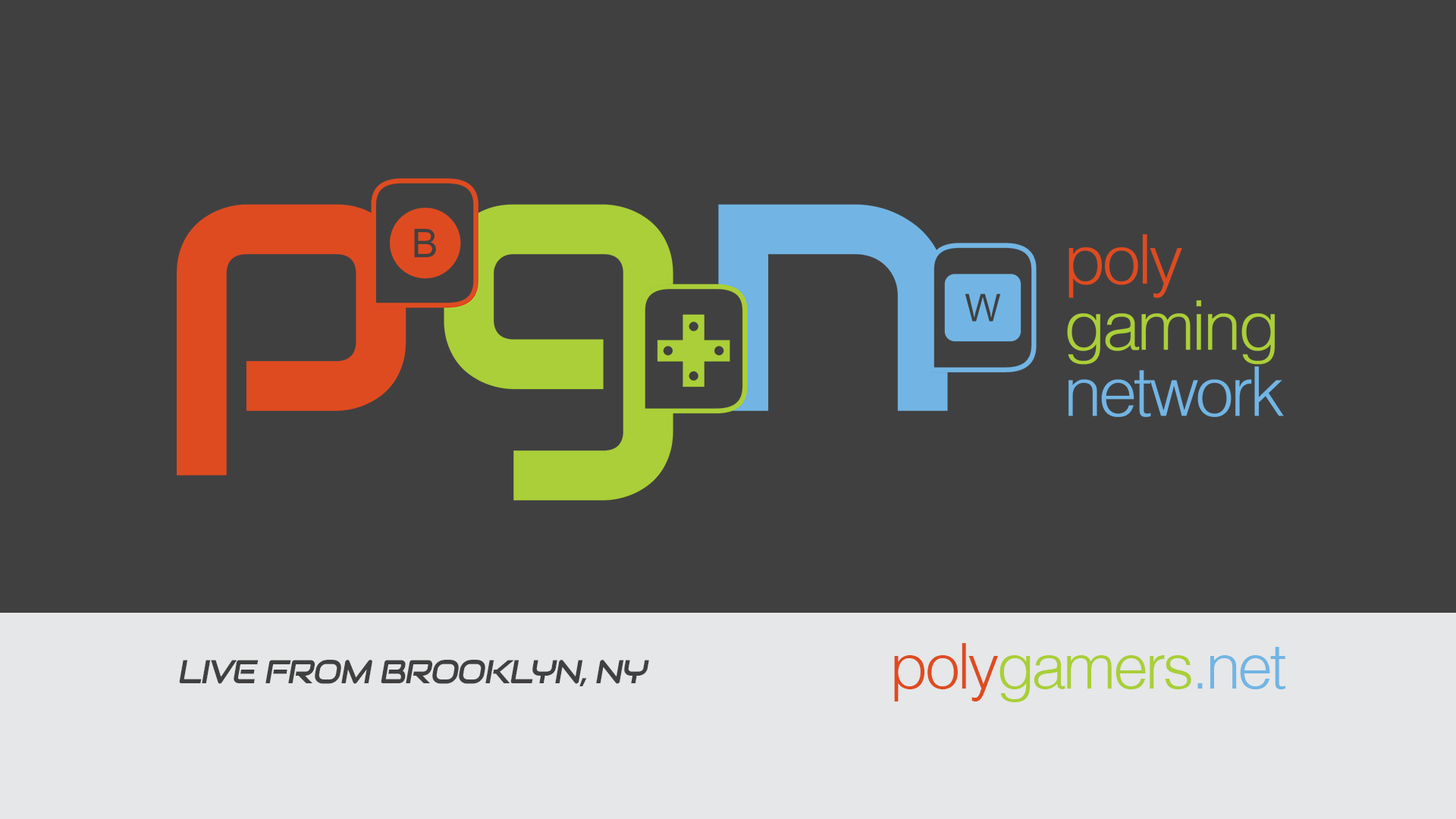
<style>
.page{position:relative;width:1456px;height:819px;background:#404041}
.page>*{position:absolute;margin:0}
.t1{font:63.1px "Helvetica-Light";letter-spacing:-0.05em;color:#a9cf37}
.t2{font:63.1px "Helvetica-Light";letter-spacing:-0.05em;color:#de4b20}
.t3{font:63.1px "Helvetica-Light";letter-spacing:-0.05em;color:#72b5e3}
.t4{font:33.1px "Audiowide-Regular";letter-spacing:-0.05em;color:#404041;text-transform:uppercase;font-style:italic}
</style>
<div class="page">
<p class="t1" style="left:894px;top:643px;width:392px;height:59px"><span class="t2">poly</span>gamers<span class="t3">.net</span></p>
<p class="t4" style="left:179px;top:660px;width:470px;height:26px">Live from Brooklyn, NY</p>
</div>
